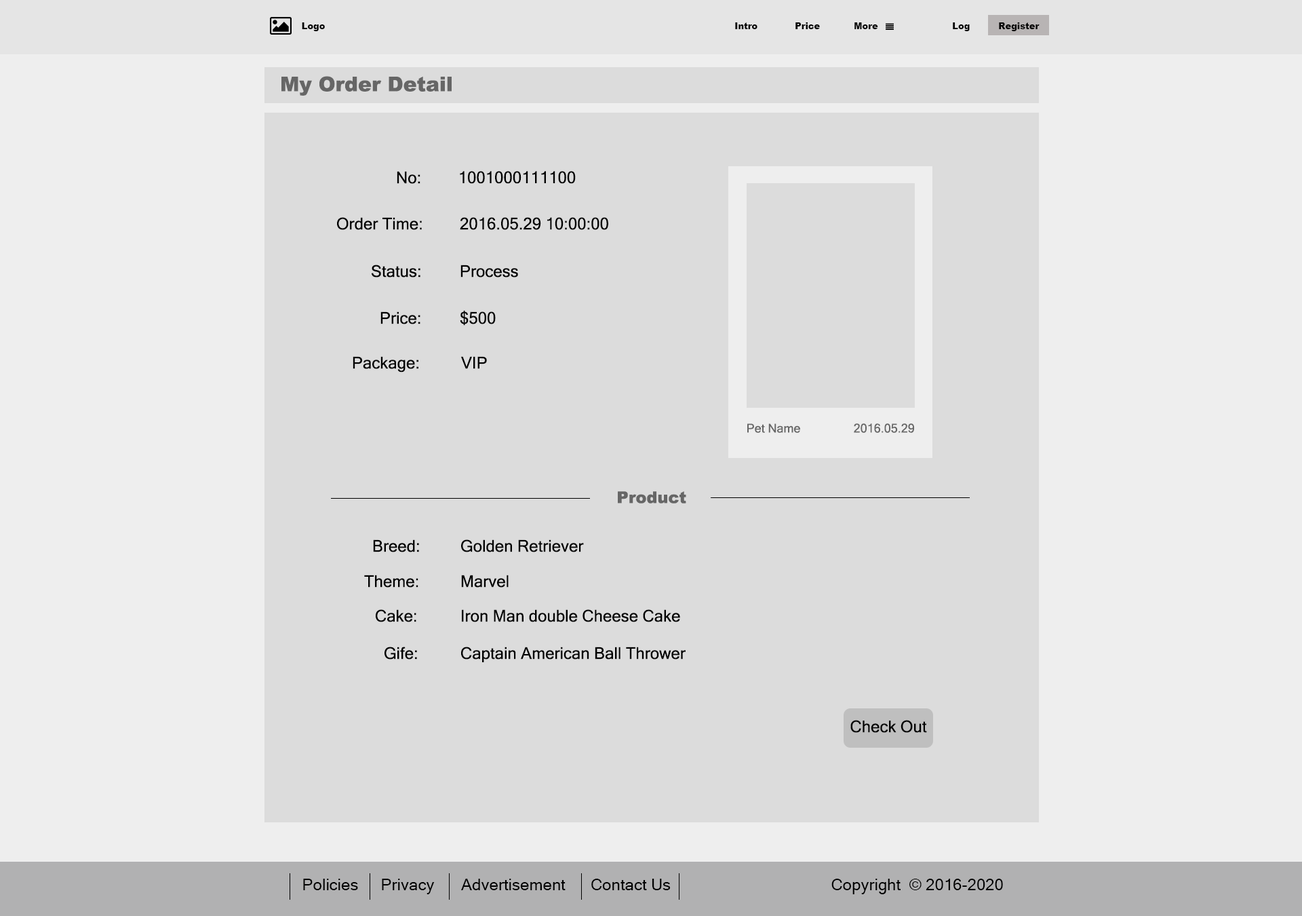
<style>
.page{position:relative;width:1302px;height:916px;background:#dcdcdc}
.page>*{position:absolute;margin:0}
.t1{font:8.8px "Arial-Black";color:#050505}
.t2{font:20.3px "Arial-Black";color:#666666}
.t3{font:16.3px "MicrosoftSansSerif";color:#000000}
.t4{font:12.2px "MicrosoftSansSerif";color:#666666}
.t5{font:16.3px "Arial-Black";color:#666666}
</style>
<div class="page">
<p class="t1" style="left:302px;top:22px;width:23px;height:9px">Logo</p>
<p class="t1" style="left:735px;top:22px;width:23px;height:7px">Intro</p>
<p class="t1" style="left:796px;top:22px;width:24px;height:7px">Price</p>
<p class="t1" style="left:855px;top:22px;width:23px;height:7px">More</p>
<p class="t1" style="left:953px;top:22px;width:17px;height:9px">Log</p>
<p class="t1" style="left:999px;top:22px;width:41px;height:9px">Register</p>
<p class="t2" style="left:281px;top:76px;width:171px;height:20px">My Order Detail</p>
<p class="t3" style="left:397px;top:171px;width:24px;height:13px">No:</p>
<p class="t3" style="left:460px;top:171px;width:116px;height:13px">1001000111100</p>
<p class="t3" style="left:337px;top:217px;width:85px;height:13px">Order Time:</p>
<p class="t3" style="left:460px;top:217px;width:148px;height:13px">2016.05.29 10:00:00</p>
<p class="t3" style="left:372px;top:265px;width:49px;height:12px">Status:</p>
<p class="t3" style="left:461px;top:265px;width:57px;height:12px">Process</p>
<p class="t3" style="left:381px;top:311px;width:40px;height:13px">Price:</p>
<p class="t3" style="left:460px;top:310px;width:36px;height:16px">$500</p>
<p class="t3" style="left:353px;top:356px;width:65px;height:16px">Package:</p>
<p class="t3" style="left:461px;top:356px;width:26px;height:13px">VIP</p>
<p class="t4" style="left:747px;top:423px;width:53px;height:10px">Pet Name</p>
<p class="t4" style="left:854px;top:423px;width:60px;height:10px">2016.05.29</p>
<p class="t5" style="left:618px;top:491px;width:68px;height:12px">Product</p>
<p class="t3" style="left:373px;top:539px;width:46px;height:13px">Breed:</p>
<p class="t3" style="left:461px;top:539px;width:123px;height:13px">Golden Retriever</p>
<p class="t3" style="left:364px;top:574px;width:54px;height:13px">Theme:</p>
<p class="t3" style="left:461px;top:574px;width:48px;height:13px">Marvel</p>
<p class="t3" style="left:376px;top:609px;width:40px;height:13px">Cake:</p>
<p class="t3" style="left:462px;top:609px;width:218px;height:13px">Iron Man double Cheese Cake</p>
<p class="t3" style="left:385px;top:646px;width:32px;height:13px">Gife:</p>
<p class="t3" style="left:461px;top:646px;width:225px;height:16px">Captain American Ball Thrower</p>
<p class="t3" style="left:851px;top:720px;width:76px;height:13px">Check Out</p>
<p class="t3" style="left:303px;top:878px;width:55px;height:12px">Policies</p>
<p class="t3" style="left:382px;top:878px;width:53px;height:16px">Privacy</p>
<p class="t3" style="left:461px;top:878px;width:105px;height:12px">Advertisement</p>
<p class="t3" style="left:591px;top:878px;width:80px;height:12px">Contact Us</p>
<p class="t3" style="left:832px;top:878px;width:171px;height:16px">Copyright  © 2016-2020</p>
</div>
